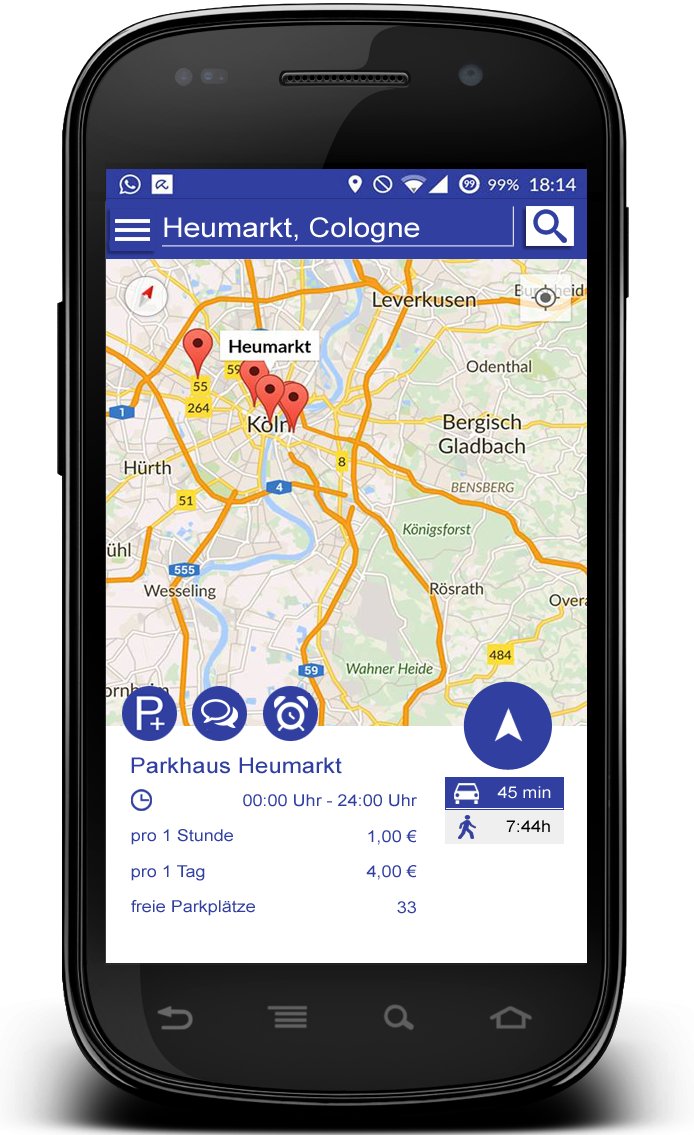
<style>
.page{position:relative;width:694px;height:1135px;background:#ffffff}
.page>*{position:absolute;margin:0}
.t1{font:27px "ArialMT";color:#fefefe;scale:1.11 1}
.t2{font:21.6px "ArialMT";color:#313fa0;scale:1.11 1}
.t3{font:16.2px/17.9px "ArialMT";color:#313fa0;scale:1.11 1}
.t4{font:16.2px "ArialMT";color:#fefefe;scale:1.11 1}
.t5{font:16.2px "ArialMT";color:#000000;scale:1.11 1}
</style>
<div class="page">
<p class="t1" style="left:164px;top:217px;width:256px;height:26px">Heumarkt, Cologne</p>
<p class="t2" style="left:131px;top:757px;width:211px;height:17px">Parkhaus Heumarkt</p>
<p class="t3" style="left:243px;top:794px;width:174px;height:120px;text-align:right">00:00 Uhr - 24:00 Uhr<br><br> 1,00 €<br><br>4,00 €<br><br>33</p>
<p class="t4" style="left:497px;top:786px;width:54px;height:13px">45 min</p>
<p class="t5" style="left:506px;top:820px;width:44px;height:12px">7:44h</p>
<p class="t3" style="left:131px;top:829px;width:124px;height:87px">pro 1 Stunde<br><br>pro 1 Tag<br><br>freie Parkplätze</p>
</div>
